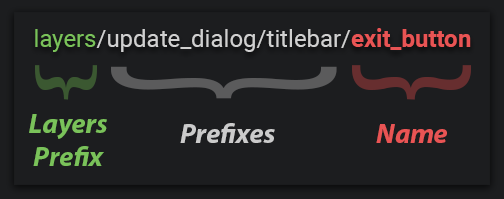
<style>
.page{position:relative;width:504px;height:199px;background:#1c1d1f}
.page>*{position:absolute;margin:0}
.t1{font:24px "Roboto-Regular";color:#d0d0d0}
.t2{font:24px "Roboto-Regular";color:#7ac25a}
.t3{font:24px "Roboto-Bold";color:#e95454}
.t4{font:77.6px "MyriadPro-Regular";color:#3b5831;scale:1.93 1}
.t5{font:150px "MyriadPro-Regular";color:#672e2f}
.t6{font:282.9px "MyriadPro-Regular";color:#5b5b5c;scale:0.48 1}
.t7{font:28px "MyriadPro-BoldIt";color:#7ac25a}
.t8{font:28px "MyriadPro-BoldIt";color:#cbcbcb}
.t9{font:28px "MyriadPro-BoldIt";color:#e95454}
</style>
<div class="page">
<p class="t1" style="left:35px;top:28px;width:436px;height:24px"><span class="t2">layers</span>/update_dialog/titlebar/<span class="t3">exit_button</span></p>
<p class="t4" style="left:35px;top:65px;width:62px;height:35px;rotate:-90deg">{</p>
<p class="t5" style="left:352px;top:65px;width:119px;height:35px;rotate:-90deg">{</p>
<p class="t6" style="left:111px;top:66px;width:226px;height:33px;rotate:-90deg">{</p>
<p class="t7" style="left:29px;top:114px;width:78px;height:52px;text-align:center">Layers<br>Prefix</p>
<p class="t8" style="left:180px;top:123px;width:95px;height:20px">Prefixes</p>
<p class="t9" style="left:376px;top:124px;width:71px;height:19px">Name</p>
</div>
